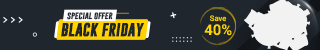
<style>
.page{position:relative;width:320px;height:50px;background:#1f262e}
.page>*{position:absolute;margin:0}
.t1{font:7.6px "GoboldBold";color:#1f262e}
.t2{font:7.7px "Heebo-Medium"}
.t3{font:13.6px "GoboldBold";color:#1f262e;font-weight:bold}
.t4{font:14.9px "Heebo-Bold";color:#ffd200}
</style>
<div class="page">
<p class="t1" style="left:67px;top:12px;width:46px;height:8px">special offer</p>
<p class="t2" style="left:209px;top:15px;width:18px;height:7px">Save</p>
<p class="t3" style="left:61px;top:22px;width:83px;height:15px">BLACK FRIDAY</p>
<p class="t4" style="left:204px;top:24px;width:28px;height:12px">40%</p>
</div>
